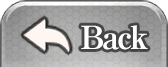
<style>
.page{position:relative;width:168px;height:67px}
.page>*{position:absolute;margin:0}
.t1{font:32px "RyuminPro-ExBold";letter-spacing:-0.08em;color:#ffffff}
</style>
<div class="page">
<p class="t1" style="left:81px;top:25px;width:67px;height:25px">Back</p>
</div>
